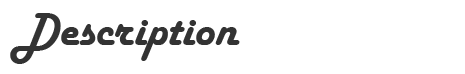
<style>
.page{position:relative;width:465px;height:74px;background:#ffffff}
.page>*{position:absolute;margin:0}
.t1{font:48px "HarlowSolid";color:#333333}
</style>
<div class="page">
<p class="t1" style="left:10px;top:13px;width:230px;height:51px">Description</p>
</div>
